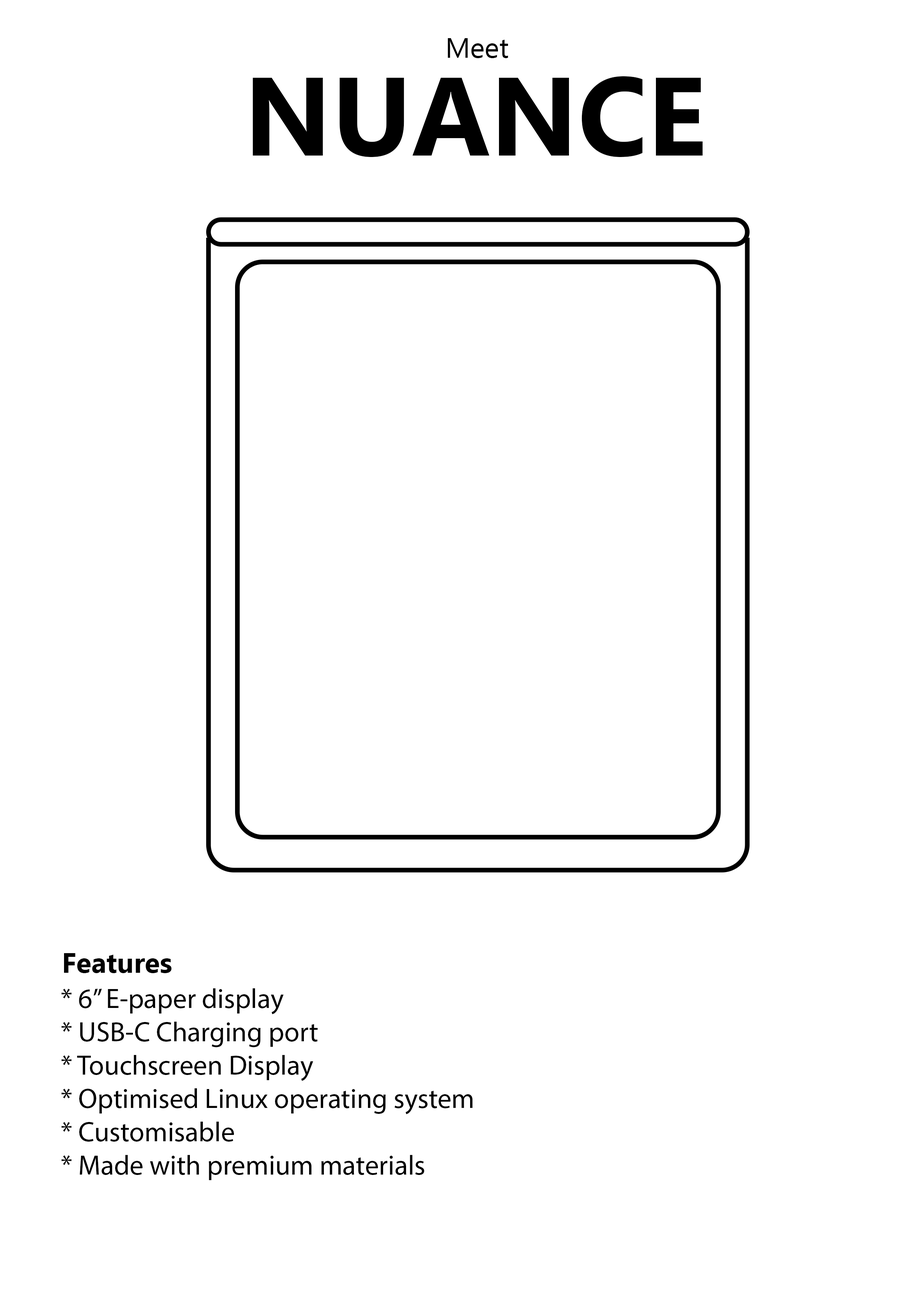
<style>
.page{position:relative;width:918px;height:1299px;background:#ffffff}
.page>*{position:absolute;margin:0}
.t1{font:27.8px "Ebrima";color:#000000}
.t2{font:111.1px "Ebrima-Bold";color:#000000}
.t3{font:27.8px "Ebrima-Bold";color:#000000}
.t4{font:27.8px "MyriadPro-Regular";color:#000000}
</style>
<div class="page">
<p class="t1" style="left:448px;top:38px;width:60px;height:20px">Meet</p>
<p class="t2" style="left:253px;top:76px;width:450px;height:81px">NUANCE</p>
<p class="t3" style="left:64px;top:953px;width:108px;height:20px">Features</p>
<p class="t4" style="left:61px;top:988px;width:412px;height:192px">* 6” E-paper display<br>* USB-C Charging port<br>* Touchscreen Display<br>* Optimised Linux operating system<br>* Customisable<br>* Made with premium materials</p>
</div>
